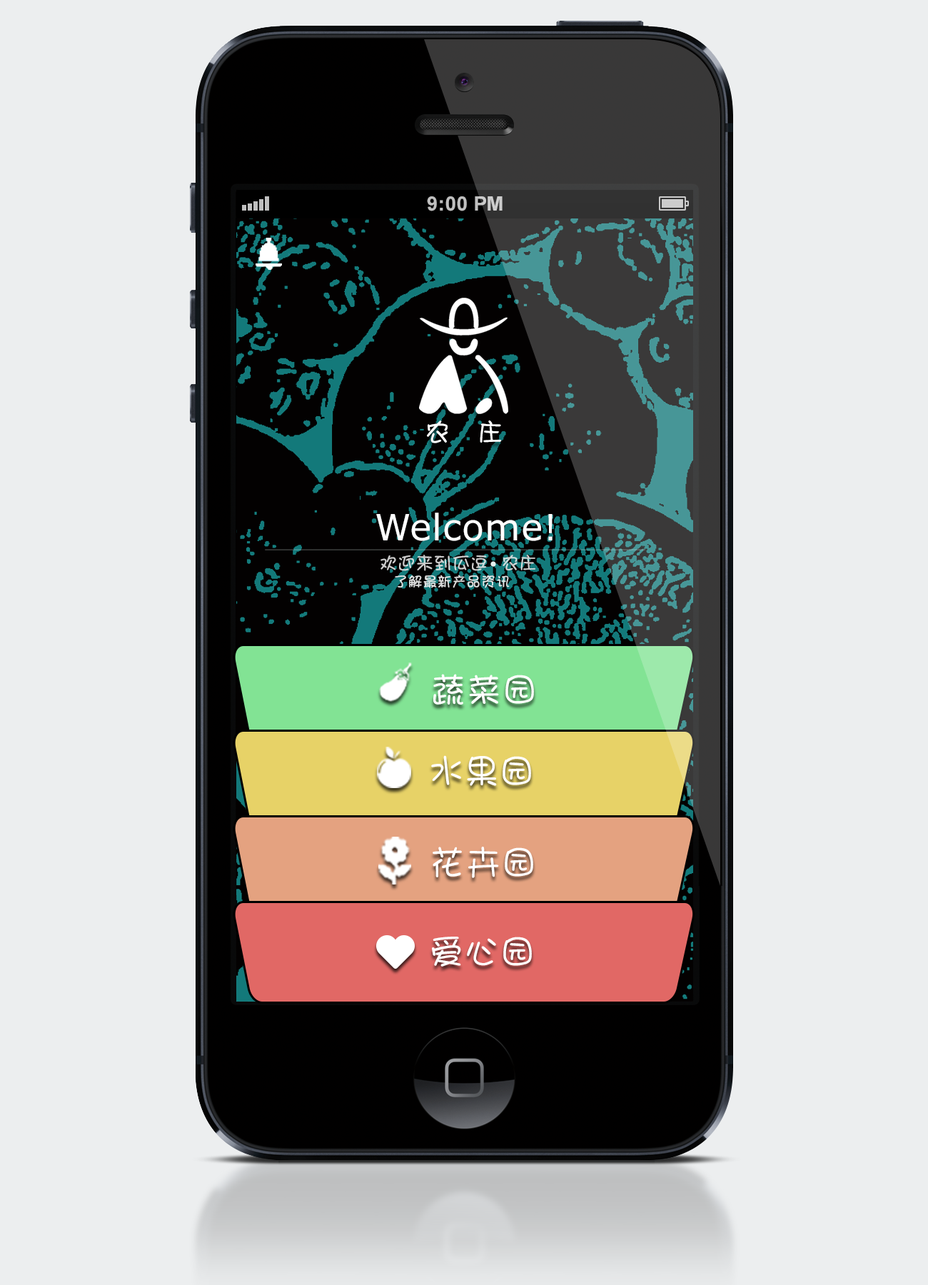
<style>
.page{position:relative;width:928px;height:1285px;background:#eceeef}
.page>*{position:absolute;margin:0}
.t1{font:25.7px "DFPShaoNvW5";letter-spacing:0.02em;color:#ffffff}
.t2{font:36.4px "Verdana";letter-spacing:0.015em;color:#ffffff}
.t3{font:17.8px "DFPShaoNvW5";letter-spacing:0.02em;color:#cccbcb}
.t4{font:14.3px "DFPShaoNvW5";letter-spacing:0.02em;color:#dfdfdf}
.t5{font:34.3px "DFPShaoNvW5";letter-spacing:0.05em;color:#ffffff}
.t6{font:34.3px "DFPShaoNvW5";letter-spacing:0.015em;color:#ffffff}
</style>
<div class="page">
<p class="t1" style="left:427px;top:420px;width:75px;height:23px">农   庄</p>
<p class="t2" style="left:376px;top:513px;width:177px;height:28px">Welcome!</p>
<p class="t3" style="left:380px;top:555px;width:156px;height:16px">欢迎来到瓜逗  农庄</p>
<p class="t4" style="left:395px;top:575px;width:115px;height:13px">了解最新产品资讯</p>
<p class="t5" style="left:433px;top:674px;width:101px;height:31px">蔬菜园</p>
<p class="t6" style="left:431px;top:755px;width:100px;height:31px">水果园</p>
<p class="t5" style="left:433px;top:847px;width:100px;height:31px">花卉园</p>
<p class="t5" style="left:432px;top:937px;width:100px;height:30px">爱心园</p>
</div>
